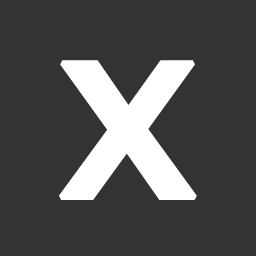
<style>
.page{position:relative;width:256px;height:256px;background:#333333}
.page>*{position:absolute;margin:0}
.t1{font:190px "BreezeSans-Bold";color:#ffffff;font-weight:bold;scale:1.05 1}
</style>
<div class="page">
<p class="t1" style="left:59px;top:60px;width:138px;height:140px">X</p>
</div>
